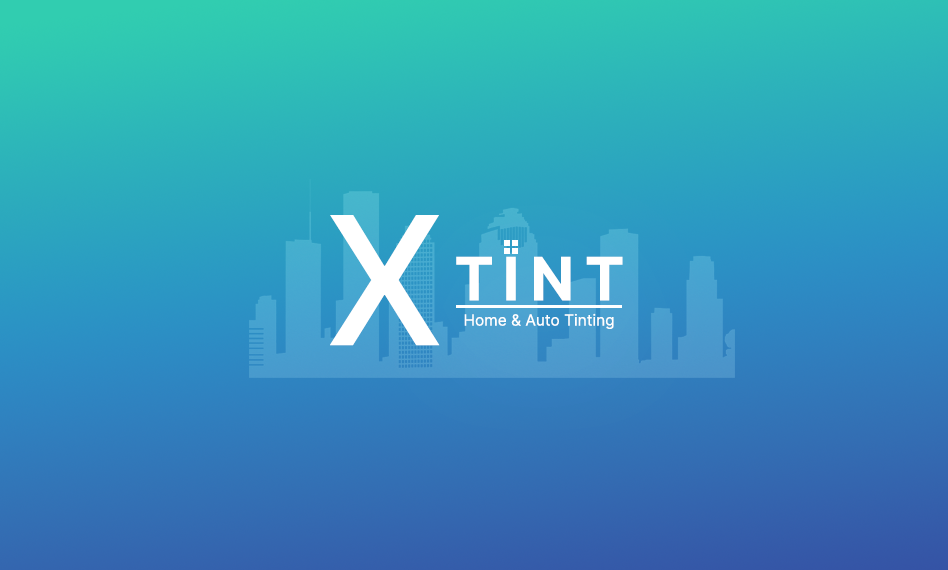
<style>
.page{position:relative;width:948px;height:570px}
.page>*{position:absolute;margin:0}
.t1{font:178.8px "Inter-Medium";color:#ffffff}
.t2{font:59.6px "Inter-Bold";color:#ffffff}
.t3{font:15.5px "Inter-Regular";color:#ffffff}
</style>
<div class="page">
<p class="t1" style="left:330px;top:215px;width:110px;height:131px">X</p>
<p class="t2" style="left:456px;top:256px;width:36px;height:45px">T</p>
<p class="t2" style="left:506px;top:256px;width:10px;height:45px">I</p>
<p class="t2" style="left:534px;top:256px;width:37px;height:45px">N</p>
<p class="t2" style="left:586px;top:256px;width:37px;height:45px">T</p>
<p class="t3" style="left:464px;top:313px;width:150px;height:16px">Home &amp; Auto Tinting</p>
</div>
